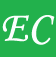
<style>
.page{position:relative;width:56px;height:57px;background:#22b14c}
.page>*{position:absolute;margin:0}
.t1{font:42.7px "STLiti";color:#fbfefd;font-weight:bold}
</style>
<div class="page">
<p class="t1" style="left:2px;top:15px;width:53px;height:30px">EC</p>
</div>
